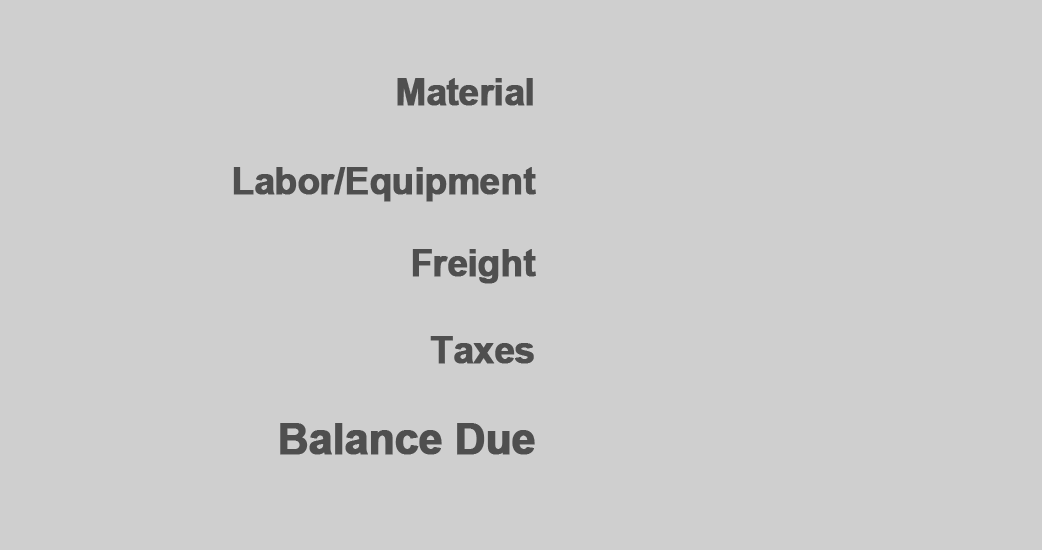
<style>
.page{position:relative;width:1042px;height:550px;background:#cfcfcf}
.page>*{position:absolute;margin:0}
.t1{font:36.8px "Arial-BoldMT";letter-spacing:-0.025em;color:#4f4f4f;font-weight:bold}
.t2{font:42.8px "Arial-BoldMT";letter-spacing:-0.025em;color:#4f4f4f;font-weight:bold}
</style>
<div class="page">
<p class="t1" style="left:397px;top:78px;width:136px;height:28px">Material</p>
<p class="t1" style="left:233px;top:167px;width:303px;height:35px">Labor/Equipment</p>
<p class="t1" style="left:412px;top:249px;width:124px;height:35px">Freight</p>
<p class="t1" style="left:430px;top:336px;width:104px;height:28px">Taxes</p>
<p class="t2" style="left:280px;top:423px;width:255px;height:32px">Balance Due</p>
</div>
